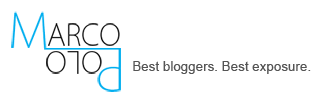
<style>
.page{position:relative;width:320px;height:103px;background:#ffffff}
.page>*{position:absolute;margin:0}
.t1{font:47.2px "KozGoPro-ExtraLight";color:#00aeef}
.t2{font:28.3px "KozGoPro-ExtraLight";color:#000000;text-transform:uppercase}
.t3{font:56.6px "KozGoPro-ExtraLight";color:#00aeef}
.t4{font:13.4px "ArialMT";color:#555555}
</style>
<div class="page">
<p class="t1" style="left:11px;top:11px;width:36px;height:37px">M</p>
<p class="t2" style="left:48px;top:23px;width:72px;height:23px">arco</p>
<p class="t2" style="left:46px;top:51px;width:56px;height:23px;rotate:180deg">olo</p>
<p class="t3" style="left:97px;top:48px;width:24px;height:44px;rotate:180deg">P</p>
<p class="t4" style="left:133px;top:61px;width:178px;height:13px">Best bloggers. Best exposure.</p>
</div>
